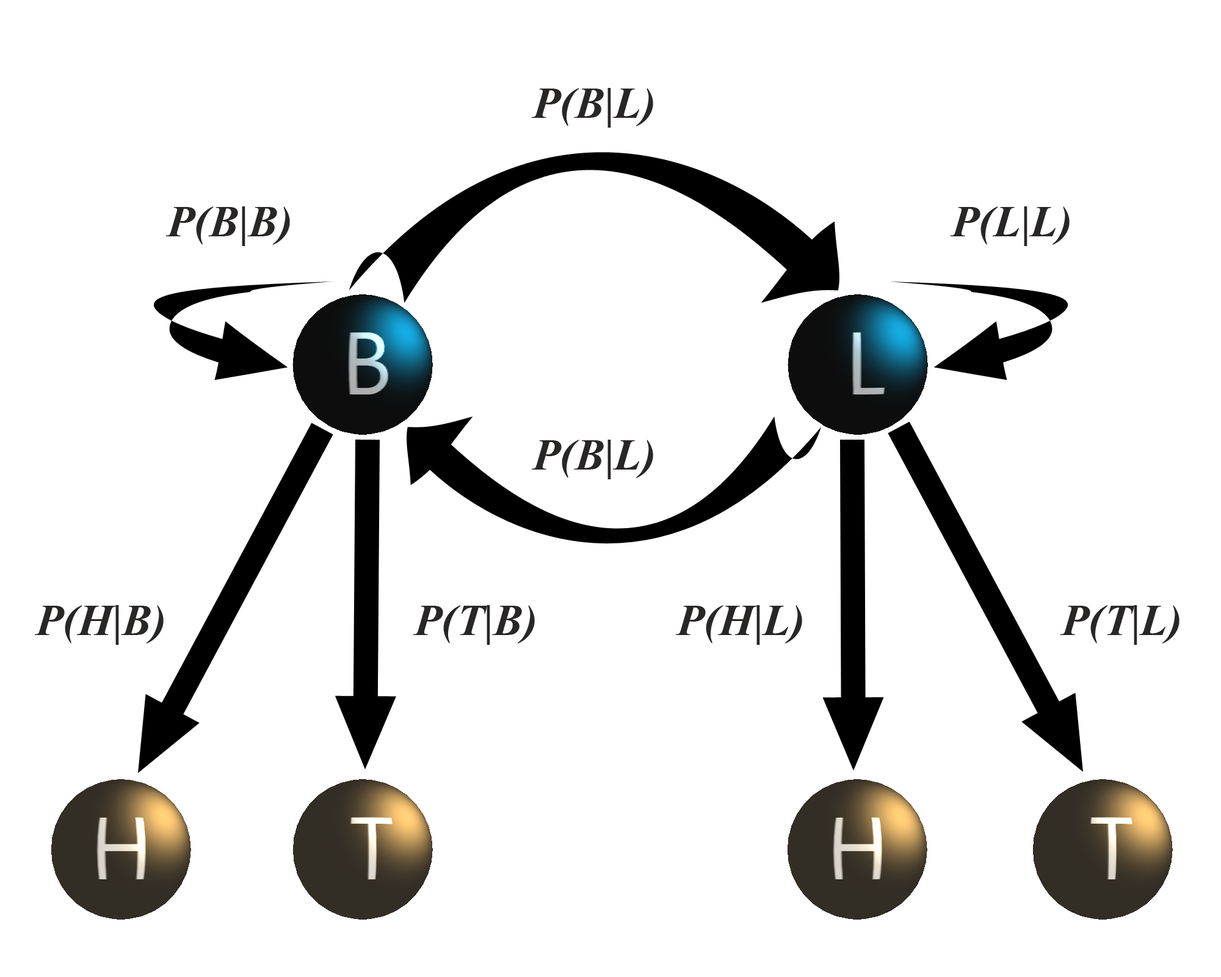
<style>
.page{position:relative;width:1221px;height:977px;background:#ffffff}
.page>*{position:absolute;margin:0}
.t1{font:54.9px "Vijaya-Bold";color:#292626}
</style>
<div class="page">
<p class="t1" style="left:531px;top:88px;width:122px;height:40px">P(B|L)</p>
<p class="t1" style="left:165px;top:206px;width:125px;height:40px">P(B|B)</p>
<p class="t1" style="left:950px;top:206px;width:119px;height:40px">P(L|L)</p>
<p class="t1" style="left:531px;top:440px;width:122px;height:39px">P(B|L)</p>
<p class="t1" style="left:34px;top:605px;width:130px;height:40px">P(H|B)</p>
<p class="t1" style="left:413px;top:605px;width:122px;height:40px">P(T|B)</p>
<p class="t1" style="left:675px;top:605px;width:127px;height:40px">P(H|L)</p>
<p class="t1" style="left:1060px;top:605px;width:119px;height:40px">P(T|L)</p>
</div>
